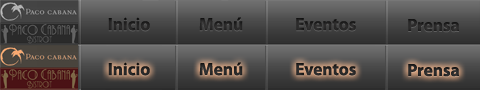
<style>
.page{position:relative;width:480px;height:90px}
.page>*{position:absolute;margin:0}
.t1{font:17.6px "MyriadPro-Bold";color:#262525}
.t2{font:17.6px "MyriadPro-Bold";color:#272727}
.t3{font:17.6px "MyriadPro-Bold";color:#282727}
.t4{font:17.6px "MyriadPro-Bold";color:#282828}
</style>
<div class="page">
<p class="t1" style="left:108px;top:17px;width:42px;height:14px">Inicio</p>
<p class="t2" style="left:199px;top:17px;width:44px;height:14px">Menú</p>
<p class="t3" style="left:296px;top:18px;width:60px;height:13px">Eventos</p>
<p class="t4" style="left:408px;top:19px;width:51px;height:13px">Prensa</p>
<p class="t1" style="left:108px;top:62px;width:42px;height:14px">Inicio</p>
<p class="t2" style="left:199px;top:62px;width:44px;height:14px">Menú</p>
<p class="t3" style="left:296px;top:63px;width:60px;height:13px">Eventos</p>
<p class="t4" style="left:408px;top:64px;width:51px;height:13px">Prensa</p>
</div>
